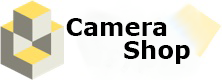
<style>
.page{position:relative;width:222px;height:80px}
.page>*{position:absolute;margin:0}
.t1{font:24px/100px "Verdana-Bold";color:#000000}
</style>
<div class="page">
<p class="t1" style="left:66px;top:18px;width:101px;height:18px;text-align:center">Camera<br>Shop<br>SH<br>Sh<br><br>S</p>
<p class="t1" style="left:124px;top:40px;width:66px;height:24px;text-align:center">Shop<br>Shop<br>SH<br>Sh</p>
</div>
